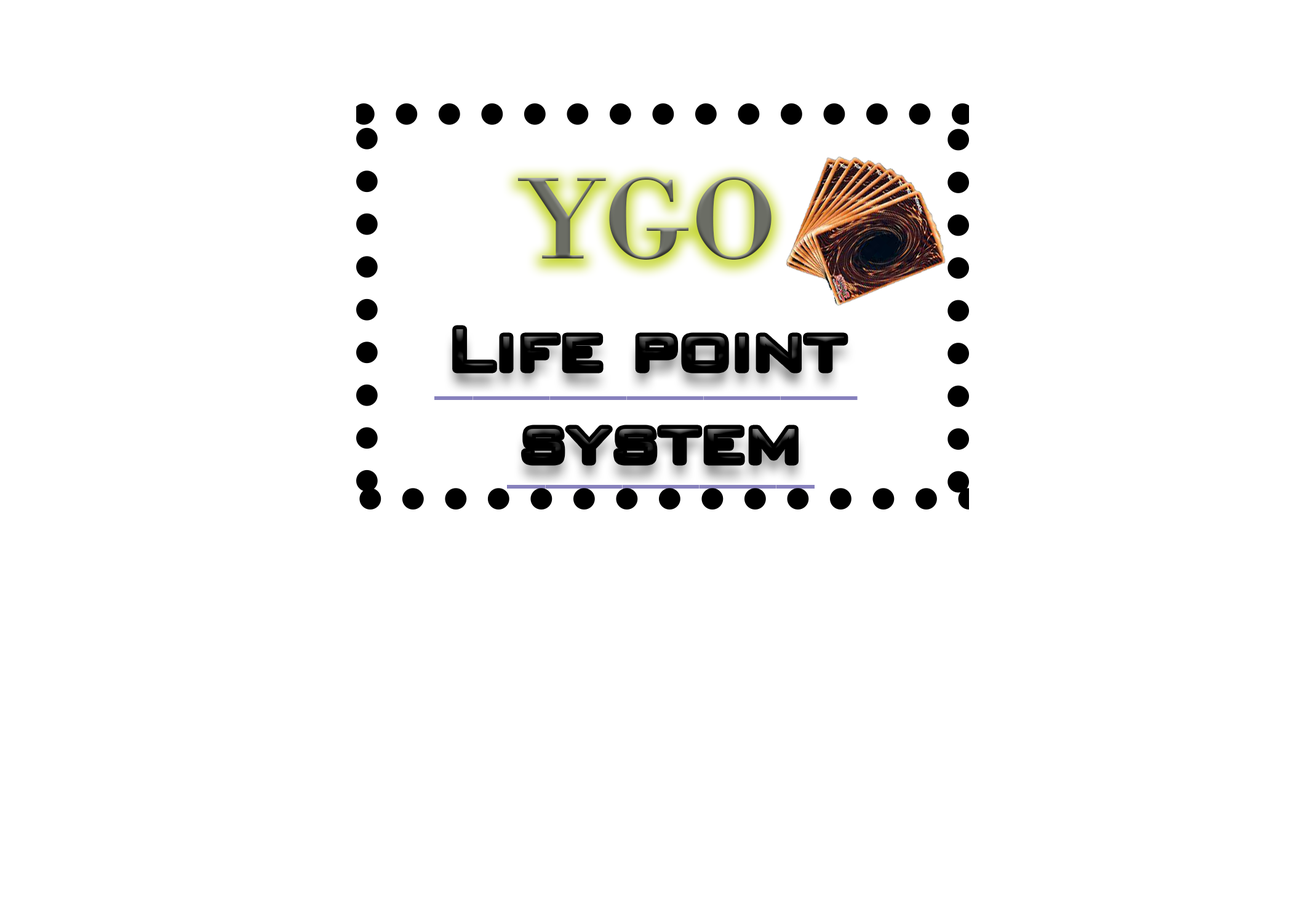
<style>
.page{position:relative;width:1292px;height:923px;background:#ffffff}
.page>*{position:absolute;margin:0}
.t1{font:123.1px "BodoniMT";color:#6b6d65}
.t2{font:76.9px "BankGothicBT-Light"}
.t3{font:76.9px "BankGothicBT-Light";color:#8781bd}
</style>
<div class="page">
<p class="t1" style="left:517px;top:177px;width:255px;height:83px">YGO</p>
<p class="t2" style="left:456px;top:329px;width:388px;height:132px;text-align:center">Life point <br>system</p>
<p class="t3" style="left:434px;top:396px;width:424px;height:4px">___________</p>
<p class="t3" style="left:507px;top:485px;width:308px;height:4px">________</p>
</div>
